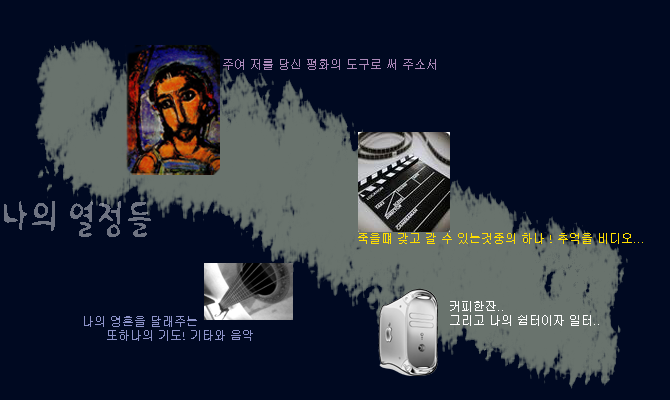
<style>
.page{position:relative;width:670px;height:400px;background:#000921}
.page>*{position:absolute;margin:0}
.t1{font:13.2px "Gulim";color:#ac89b9;scale:0.91 1}
.t2{font:39.6px "Seoul-Dream";color:#6e7381;scale:0.91 1}
.t3{font:13.2px "Gulim";color:#ffde00;scale:0.91 1}
.t4{font:13.2px "Gulim";color:#ffffff;scale:0.91 1}
.t5{font:13.2px "Gulim";color:#8d93c9;scale:0.91 1}
</style>
<div class="page">
<p class="t1" style="left:223px;top:59px;width:213px;height:11px">주여 저를 당신 평화의 도구로 써 주소서</p>
<p class="t2" style="left:4px;top:201px;width:147px;height:36px">나의 열정들</p>
<p class="t3" style="left:358px;top:233px;width:285px;height:11px">죽을떄 갖고 갈 수 있는것중의 하나 ! 추억을 비디오...</p>
<p class="t4" style="left:450px;top:301px;width:149px;height:25px">커피한잔..<br>그리고 나의 쉼터이자 일터..</p>
<p class="t5" style="left:84px;top:316px;width:169px;height:25px"><span class="t4">      </span>나의 영혼을 달래주는 <br>            또하나의 기도! 기타와 음악</p>
</div>
